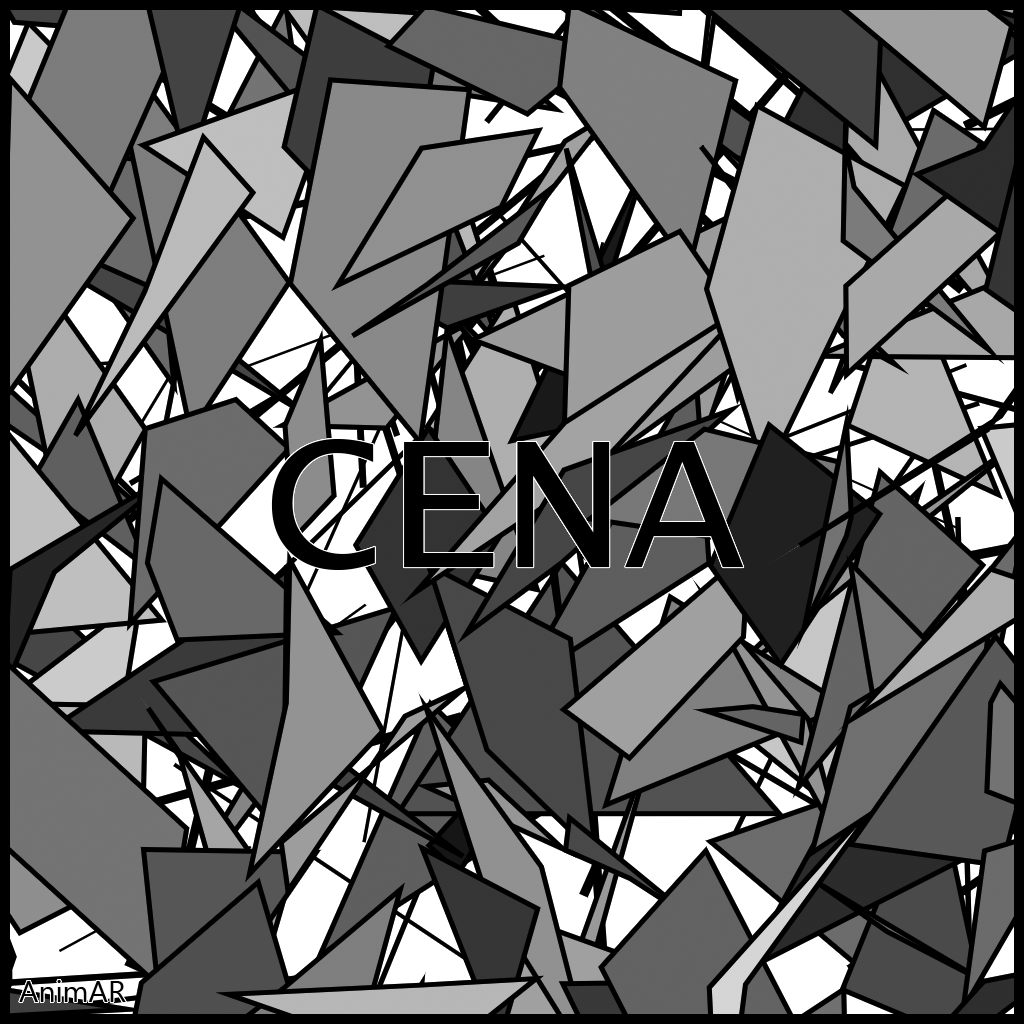
<style>
.page{position:relative;width:1024px;height:1024px;background:#000000}
.page>*{position:absolute;margin:0}
.t1{font:200px "LucidaConsole";color:#000000}
</style>
<div class="page">
<p class="t1" style="left:271px;top:439px;width:473px;height:131px">CENA</p>
</div>
